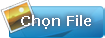
<style>
.page{position:relative;width:105px;height:38px;background:#ffffff}
.page>*{position:absolute;margin:0}
.t1{font:14px "Verdana-Bold";color:#fffffd}
</style>
<div class="page">
<p class="t1" style="left:21px;top:15px;width:70px;height:14px">Chọn File</p>
</div>
